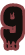
<style>
.page{position:relative;width:25px;height:55px;background:#130f0c}
.page>*{position:absolute;margin:0}
.t1{font:45.8px "CSNPWDTNFI";color:#130f0c}
</style>
<div class="page">
<p class="t1" style="left:3px;top:6px;width:20px;height:42px">9</p>
</div>
